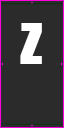
<style>
.page{position:relative;width:64px;height:128px;background:#2b2b2b}
.page>*{position:absolute;margin:0}
.t1{font:64px "Impact";color:#ffffff}
</style>
<div class="page">
<p class="t1" style="left:20px;top:23px;width:22px;height:41px">z</p>
</div>
